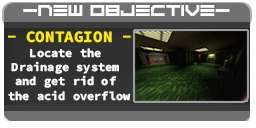
<style>
.page{position:relative;width:256px;height:128px}
.page>*{position:absolute;margin:0}
.t1{font:11px "ScifiAdventure";color:#ffffff}
.t2{font:16px "SourceCodeRoman-Bold";color:#ffea00}
.t3{font:12px "SourceCodeRoman-Bold";color:#ffffff}
</style>
<div class="page">
<p class="t1" style="left:23px;top:5px;width:207px;height:11px">-NEW OBJECTIVE-</p>
<p class="t2" style="left:8px;top:31px;width:123px;height:12px">- CONTAGION -</p>
<p class="t3" style="left:8px;top:48px;width:123px;height:53px;text-align:center">Locate the <br>Drainage system <br>and get rid of <br>the acid overflow</p>
</div>
